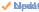
<style>
.page{position:relative;width:39px;height:12px;background:#ffffff}
.page>*{position:absolute;margin:0}
.t1{font:10px "GillSans-Bold";letter-spacing:-0.05em;color:#7a9ac8}
</style>
<div class="page">
<p class="t1" style="left:14px;top:2px;width:25px;height:10px">Updated!</p>
<p class="t1" style="left:14px;top:2px;width:22px;height:7px">New!</p>
</div>
